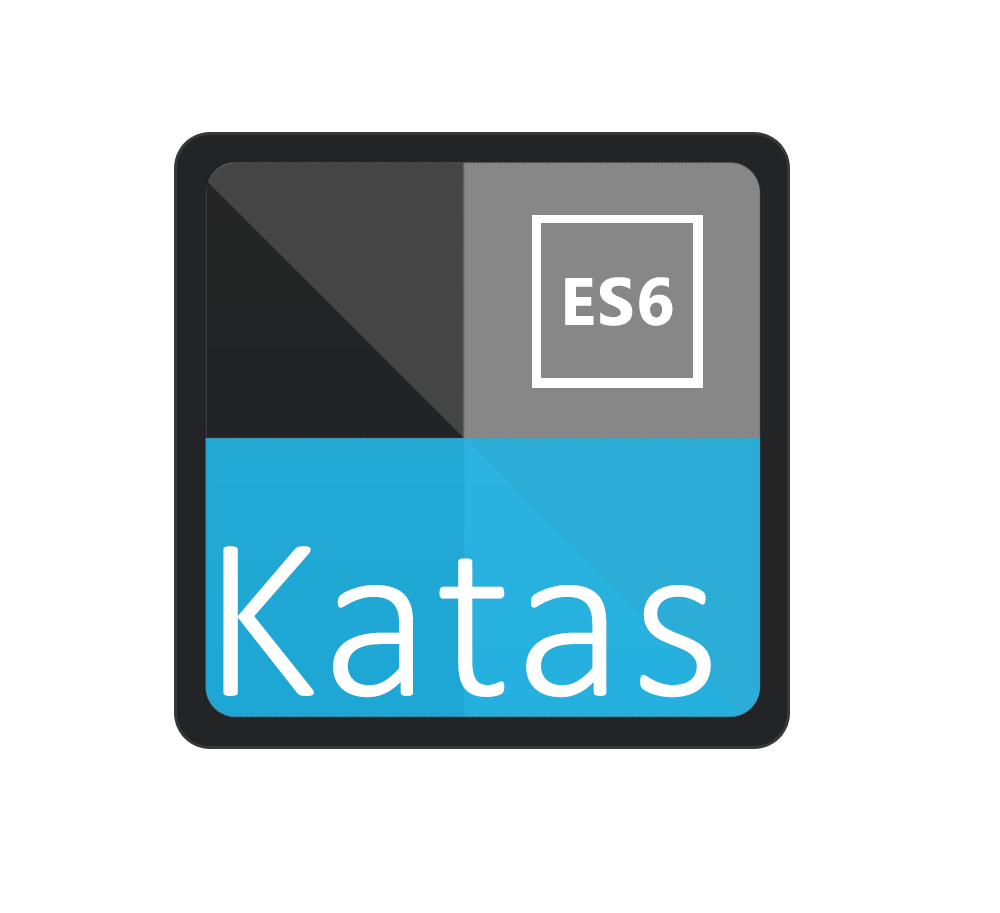
<style>
.page{position:relative;width:1000px;height:913px;background:#ffffff}
.page>*{position:absolute;margin:0}
.t1{font:66.7px "SegoeUI-Bold";letter-spacing:0.025em;color:#ffffff}
.t2{font:234.2px "Calibri-Light";letter-spacing:0.025em;color:#ffffff}
</style>
<div class="page">
<p class="t1" style="left:565px;top:277px;width:108px;height:49px">ES6</p>
<p class="t2" style="left:223px;top:546px;width:488px;height:152px">Katas</p>
</div>
